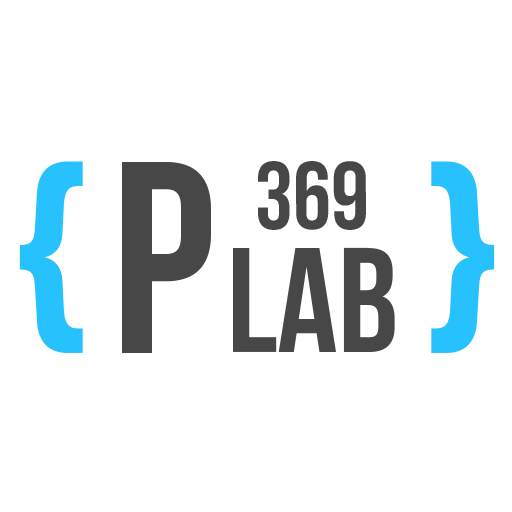
<style>
.page{position:relative;width:512px;height:512px;background:#ffffff}
.page>*{position:absolute;margin:0}
.t1{font:273.5px "BebasNeueBold";color:#27c1fe}
.t2{font:272.3px "BebasNeueBold";color:#474747}
.t3{font:95.9px "BebasNeueBold";color:#474747}
.t4{font:148.7px "BebasNeueBold";color:#474747}
</style>
<div class="page">
<p class="t1" style="left:19px;top:161px;width:476px;height:192px">{     <span class="t2">P </span>}</p>
<p class="t3" style="left:258px;top:161px;width:108px;height:69px">369</p>
<p class="t4" style="left:233px;top:247px;width:162px;height:105px">lab</p>
</div>
